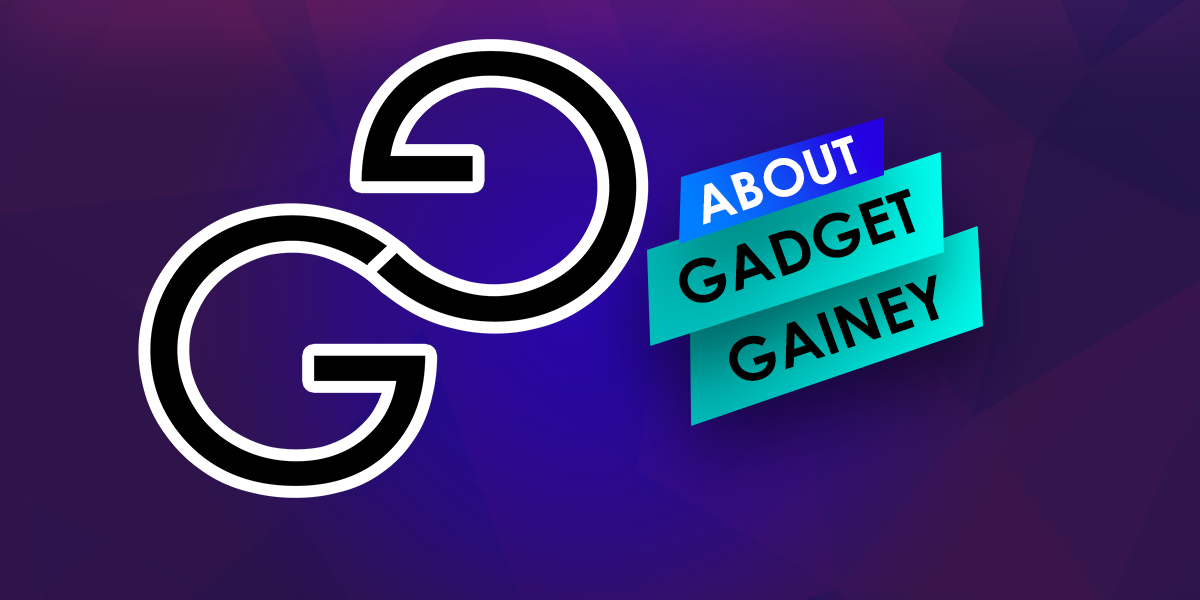
<style>
.page{position:relative;width:1200px;height:600px}
.page>*{position:absolute;margin:0}
.t1{font:51.5px "CenturyGothic-Bold";color:#ffffff;scale:1.03 1}
.t2{font:60px "CenturyGothic-Bold";color:#000000;scale:1.03 1}
.t3{font:59.5px "CenturyGothic-Bold";color:#000000;scale:1.03 1}
</style>
<div class="page">
<p class="t1" style="left:703px;top:135px;width:154px;height:90px;rotate:-19deg">ABOUT</p>
<p class="t2" style="left:679px;top:188px;width:237px;height:115px;rotate:-19deg">GADGET</p>
<p class="t3" style="left:729px;top:274px;width:210px;height:107px;rotate:-19deg">GAINEY</p>
</div>
